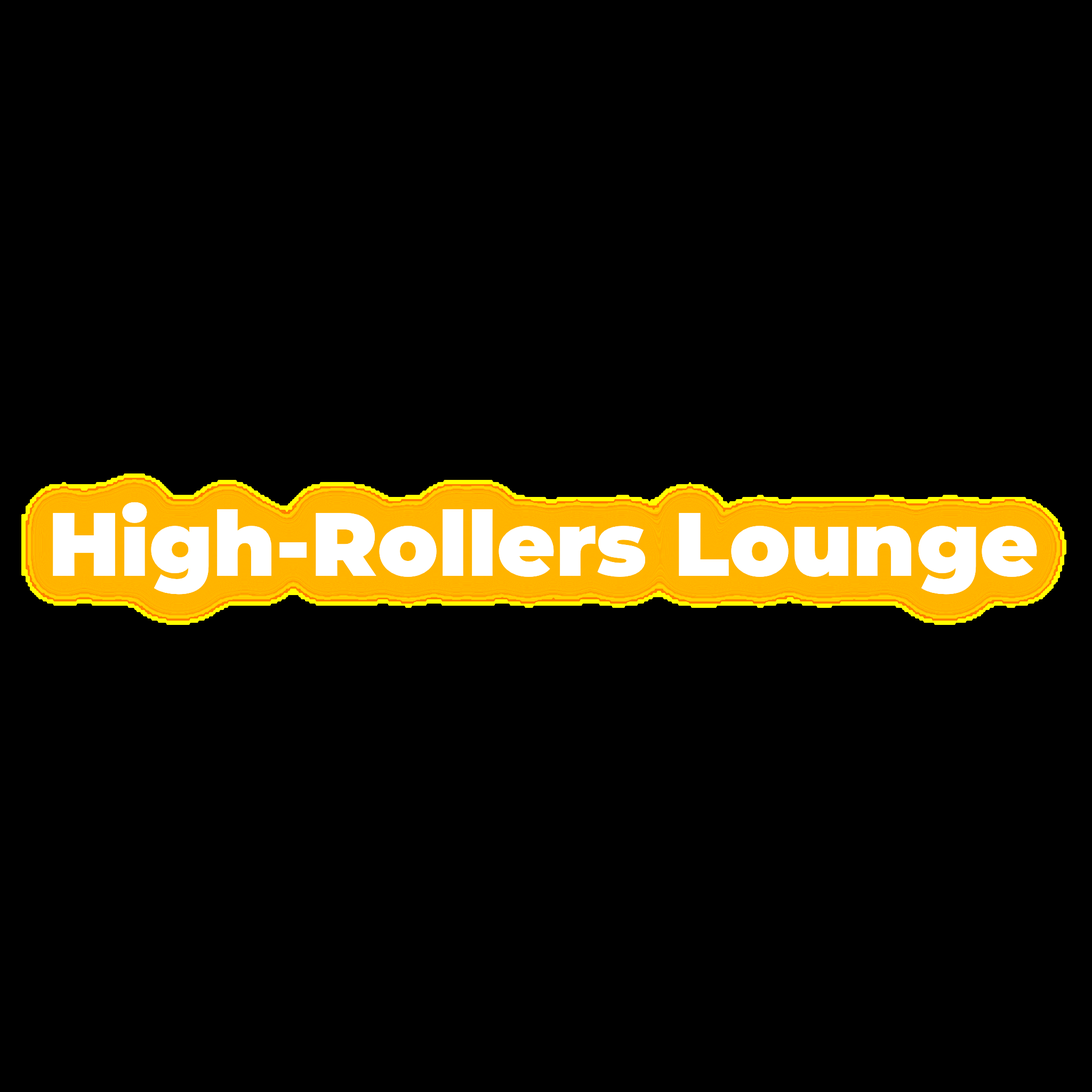
<style>
.page{position:relative;width:1092px;height:1092px;background:#000000}
.page>*{position:absolute;margin:0}
.t1{font:89.7px "Montserrat-Black";color:#ffffff}
</style>
<div class="page">
<p class="t1" style="left:0px;top:0px;width:1092px;height:1092px;text-align:center">High-Rollers Lounge</p>
</div>
